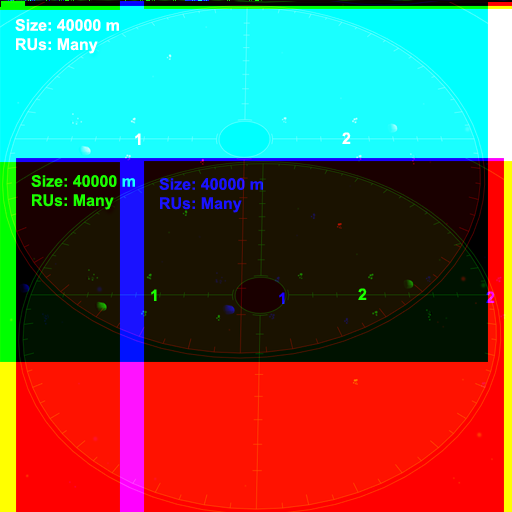
<style>
.page{position:relative;width:512px;height:512px}
.page>*{position:absolute;margin:0}
.t1{font:16px "Arial-BoldMT"}
.t2{font:16px "Arial-BoldMT";color:#ffffff}
</style>
<div class="page">
<p class="t1" style="left:15px;top:17px;width:104px;height:35px">Size: 40000 m<br>RUs: Many</p>
<p class="t2" style="left:135px;top:131px;width:6px;height:12px">1</p>
</div>
